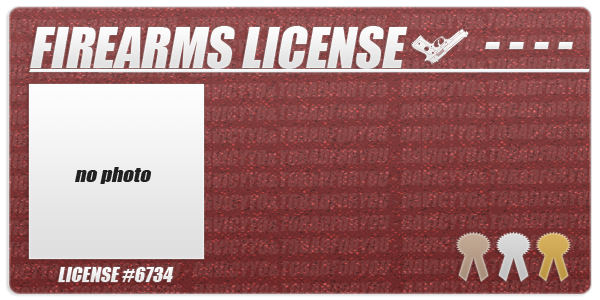
<style>
.page{position:relative;width:600px;height:300px}
.page>*{position:absolute;margin:0}
.t1{font:51.8px "Impact";color:#ffffff;font-style:italic}
.t2{font:51.8px "Impact";color:#ffffff;font-style:italic;scale:2.44 1}
.t3{font:18.7px "Impact";color:#212121;font-style:italic;scale:1.13 1}
.t4{font:19.2px "Impact";color:#ffffff;font-style:italic}
</style>
<div class="page">
<p class="t1" style="left:30px;top:26px;width:378px;height:43px">FIREARMS LICENSE</p>
<p class="t1" style="left:485px;top:42px;width:88px;height:7px">- - - -</p>
<p class="t2" style="left:29px;top:69px;width:561px;height:4px">________</p>
<p class="t3" style="left:75px;top:167px;width:77px;height:17px">no photo</p>
<p class="t4" style="left:58px;top:267px;width:116px;height:15px">LICENSE #6734</p>
</div>
